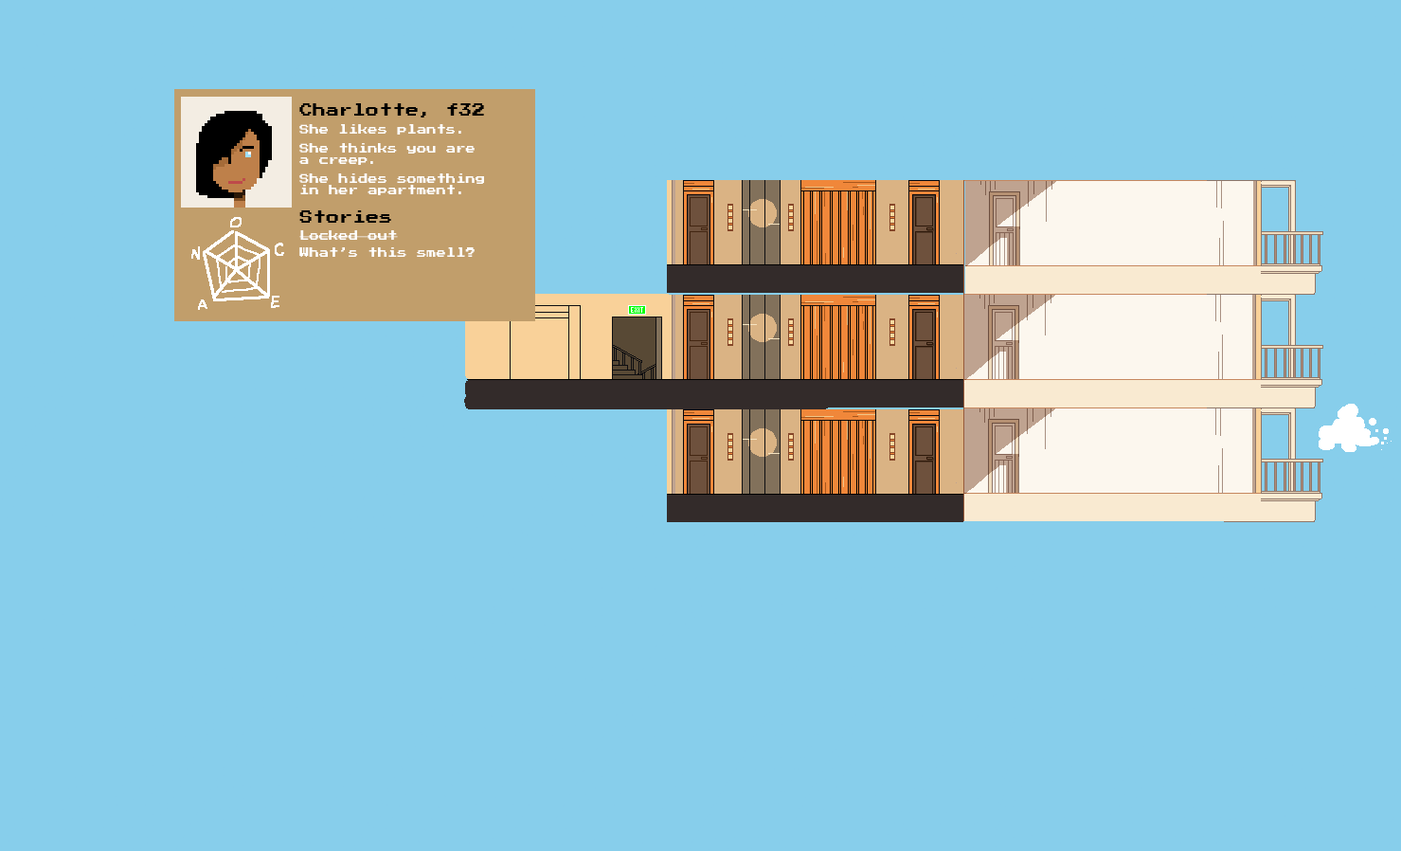
<style>
.page{position:relative;width:1401px;height:851px;background:#87ceeb}
.page>*{position:absolute;margin:0}
.t1{font:13.3px "PressStart2P-Regular";color:#000000}
.t2{font:9.8px "PressStart2P-Regular";color:#ffffff}
</style>
<div class="page">
<p class="t1" style="left:299px;top:103px;width:185px;height:14px">Charlotte, f32</p>
<p class="t2" style="left:299px;top:124px;width:162px;height:11px">She likes plants.</p>
<p class="t2" style="left:299px;top:143px;width:176px;height:22px">She thinks you are<br>a creep.</p>
<p class="t2" style="left:299px;top:173px;width:185px;height:22px">She hides something<br>in her apartment.</p>
<p class="t1" style="left:299px;top:210px;width:92px;height:13px">Stories</p>
<p class="t2" style="left:299px;top:230px;width:99px;height:10px">Locked out</p>
<p class="t2" style="left:299px;top:247px;width:176px;height:10px">What’s this smell?</p>
</div>
